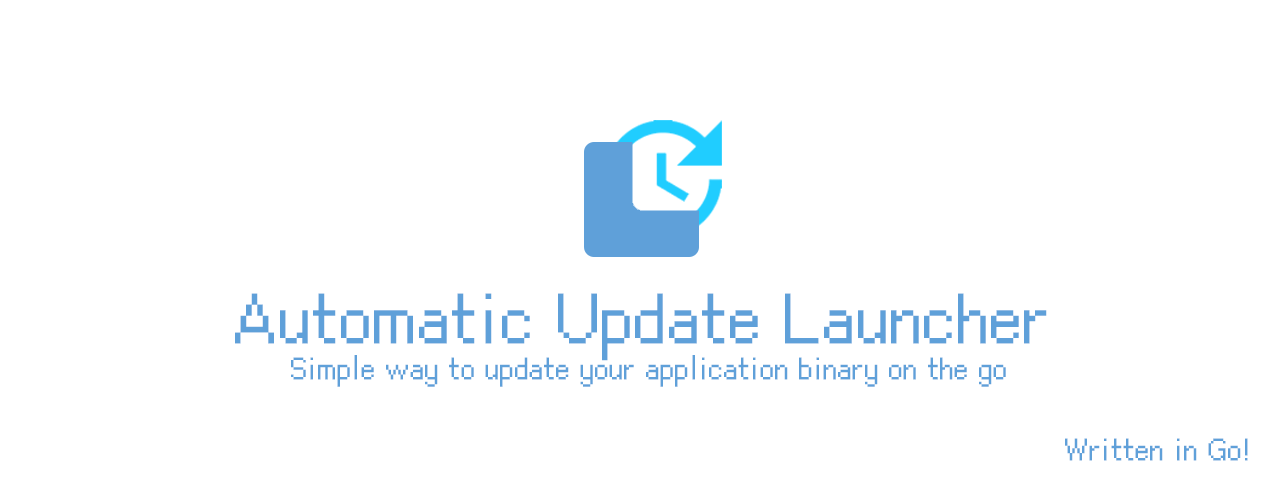
<style>
.page{position:relative;width:1280px;height:480px;background:#ffffff}
.page>*{position:absolute;margin:0}
.t1{font:66.7px "Cubic_11";color:#5fa0d9}
.t2{font:29.2px "Cubic_11";color:#5fa0d9}
</style>
<div class="page">
<p class="t1" style="left:235px;top:293px;width:812px;height:68px">Automatic Update Launcher</p>
<p class="t2" style="left:291px;top:355px;width:715px;height:32px">Simple way to update your application binary on the go</p>
<p class="t2" style="left:1065px;top:438px;width:183px;height:23px">Written in Go!</p>
</div>
